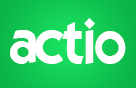
<style>
.page{position:relative;width:136px;height:88px}
.page>*{position:absolute;margin:0}
.t1{font:59px "ELEGANCE";color:#ffffff}
</style>
<div class="page">
<p class="t1" style="left:10px;top:18px;width:116px;height:46px">actio</p>
</div>
